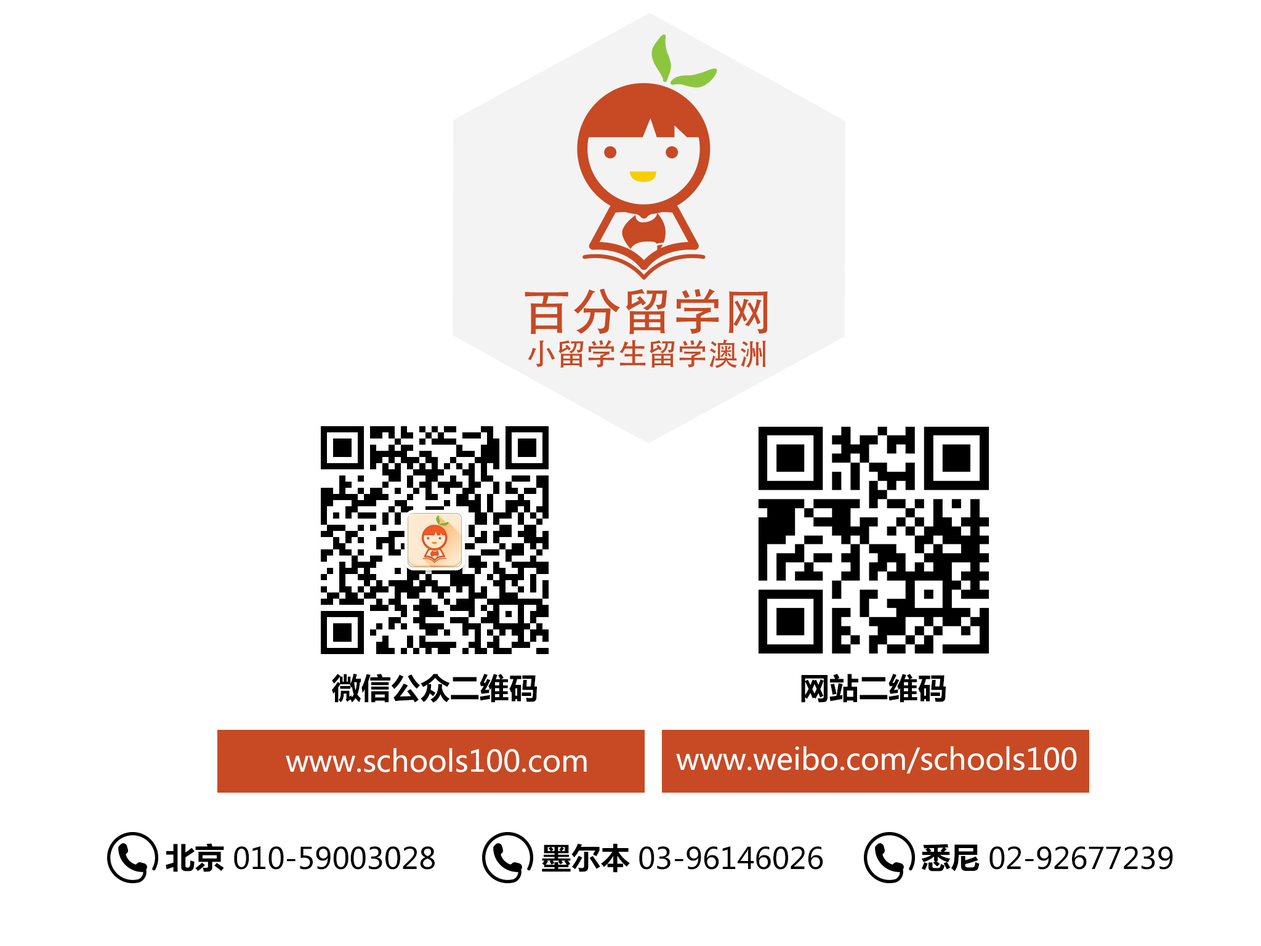
<style>
.page{position:relative;width:1261px;height:946px;background:#ffffff}
.page>*{position:absolute;margin:0}
.t1{font:29.6px "MicrosoftYaHei-Bold";color:#000000}
.t2{font:29.6px "MicrosoftYaHei";color:#ffffff}
.t3{font:29.6px "MicrosoftYaHei";color:#000000}
</style>
<div class="page">
<p class="t1" style="left:332px;top:673px;width:205px;height:29px">微信公众二维码</p>
<p class="t1" style="left:801px;top:674px;width:145px;height:28px">网站二维码</p>
<p class="t2" style="left:286px;top:747px;width:301px;height:25px">www.schools100.com</p>
<p class="t2" style="left:676px;top:746px;width:401px;height:27px">www.weibo.com/schools100</p>
<p class="t1" style="left:166px;top:843px;width:58px;height:29px">北京</p>
<p class="t3" style="left:234px;top:846px;width:201px;height:23px">010-59003028</p>
<p class="t1" style="left:542px;top:843px;width:88px;height:29px">墨尔本</p>
<p class="t3" style="left:639px;top:846px;width:184px;height:23px">03-96146026</p>
<p class="t1" style="left:921px;top:843px;width:59px;height:28px">悉尼</p>
<p class="t3" style="left:989px;top:846px;width:184px;height:23px">02-92677239</p>
</div>
